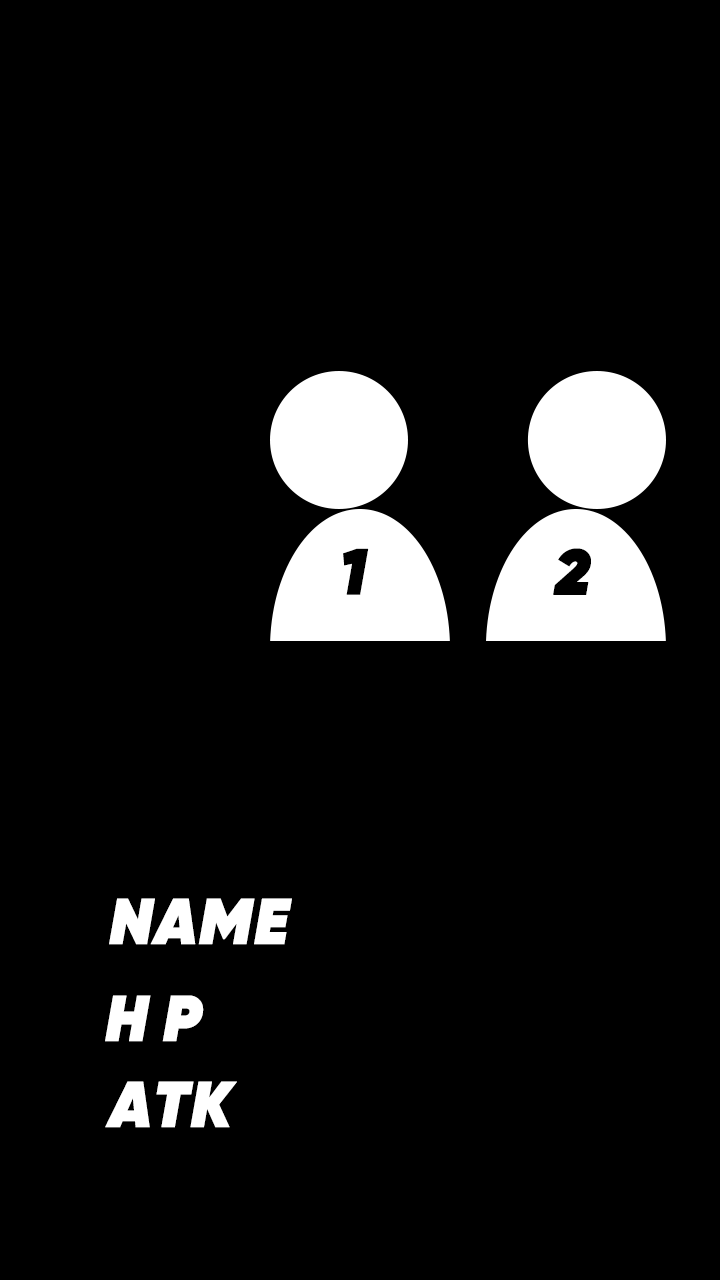
<style>
.page{position:relative;width:720px;height:1280px;background:#000000}
.page>*{position:absolute;margin:0}
.t1{font:64.4px "Gilroy-HeavyItalic";letter-spacing:0.2em;color:#000000;font-weight:bold}
.t2{font:64.4px "Gilroy-HeavyItalic";color:#ffffff;font-weight:bold}
.t3{font:64.4px "Gilroy-HeavyItalic";letter-spacing:0.2em;color:#ffffff;font-weight:bold}
</style>
<div class="page">
<p class="t1" style="left:343px;top:548px;width:26px;height:47px">1</p>
<p class="t1" style="left:553px;top:548px;width:38px;height:47px">2</p>
<p class="t2" style="left:109px;top:898px;width:183px;height:47px">NAME</p>
<p class="t3" style="left:105px;top:995px;width:99px;height:47px">HP</p>
<p class="t2" style="left:105px;top:1081px;width:132px;height:47px">ATK</p>
</div>
